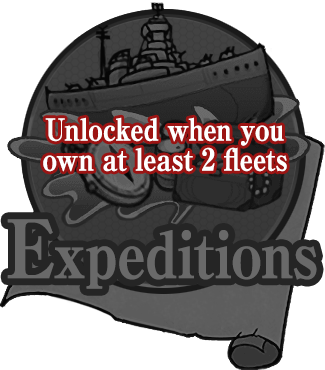
<style>
.page{position:relative;width:325px;height:370px;background:#ffffff}
.page>*{position:absolute;margin:0}
.t1{font:30px/30px "RyuminPro-ExBold";letter-spacing:-0.04em;color:#ffffff;font-weight:bold;scale:0.9 1}
.t2{font:64px "RyuminPro-ExBold";letter-spacing:-0.04em;color:#696969;font-weight:bold;scale:0.9 1}
.t3{font:80px "RyuminPro-ExBold";letter-spacing:-0.04em;color:#696969;font-weight:bold;scale:0.9 1}
</style>
<div class="page">
<p class="t1" style="left:43px;top:117px;width:244px;height:55px;text-align:center">Unlocked when you <br>own at least 2 fleets</p>
<p class="t2" style="left:7px;top:219px;width:310px;height:70px"><span class="t3">E</span>xpeditions</p>
</div>
